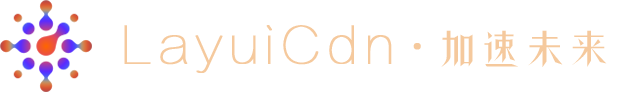
<style>
.page{position:relative;width:620px;height:92px;background:#ffffff}
.page>*{position:absolute;margin:0}
.t1{font:50px "FZLTCXHJW--GB1-0";letter-spacing:0.08em;color:#f6ca9d;font-weight:bold}
.t2{font:41.7px "Ò¶¸ùÓÑÎ¢¸ÕÌå";letter-spacing:0.075em;color:#f6ca9d}
.t3{font:45.8px "MicrosoftYaHei";letter-spacing:0.08em;color:#f6ca9d;font-weight:bold}
</style>
<div class="page">
<p class="t1" style="left:124px;top:25px;width:268px;height:48px">LayuiCdn</p>
<p class="t2" style="left:441px;top:30px;width:166px;height:37px">加速未来</p>
<p class="t3" style="left:413px;top:43px;width:8px;height:7px">·</p>
</div>
